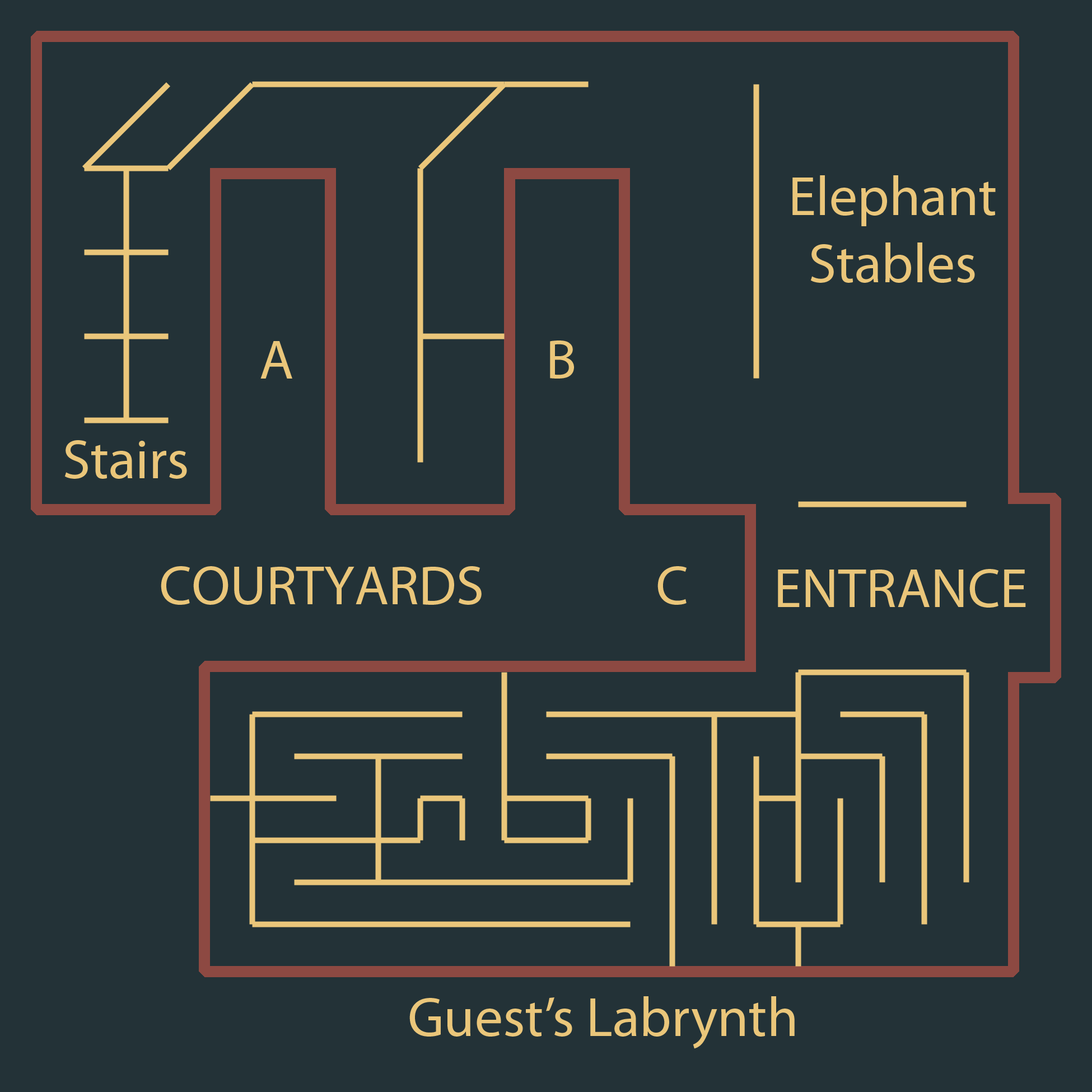
<style>
.page{position:relative;width:1092px;height:1092px;background:#233237}
.page>*{position:absolute;margin:0}
.t1{font:56px "MyriadPro-Regular";color:#eac67a}
</style>
<div class="page">
<p class="t1" style="left:792px;top:175px;width:204px;height:108px;text-align:center">Elephant<br>Stables</p>
<p class="t1" style="left:260px;top:341px;width:32px;height:38px">A</p>
<p class="t1" style="left:550px;top:340px;width:24px;height:39px">B</p>
<p class="t1" style="left:64px;top:440px;width:123px;height:39px">Stairs</p>
<p class="t1" style="left:161px;top:566px;width:321px;height:39px">COURTYARDS</p>
<p class="t1" style="left:657px;top:566px;width:30px;height:39px">C</p>
<p class="t1" style="left:778px;top:569px;width:248px;height:39px">ENTRANCE</p>
<p class="t1" style="left:409px;top:996px;width:386px;height:53px">Guest’s Labrynth</p>
</div>
